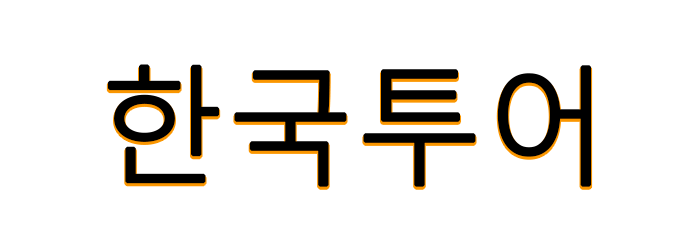
<style>
.page{position:relative;width:700px;height:250px;background:#ffffff}
.page>*{position:absolute;margin:0}
.t1{font:125px "MalgunGothic-Semilight";color:#000000;font-weight:bold}
</style>
<div class="page">
<p class="t1" style="left:107px;top:64px;width:485px;height:123px">한국투어</p>
</div>
